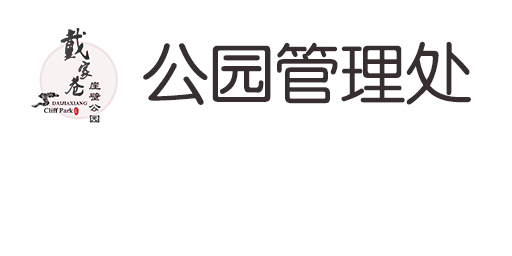
<style>
.page{position:relative;width:512px;height:256px;background:#ffffff}
.page>*{position:absolute;margin:0}
.t1{font:66.1px "FZY3JW--GB1-0";color:#362e2f}
</style>
<div class="page">
<p class="t1" style="left:143px;top:41px;width:328px;height:64px">公园管理处</p>
</div>
